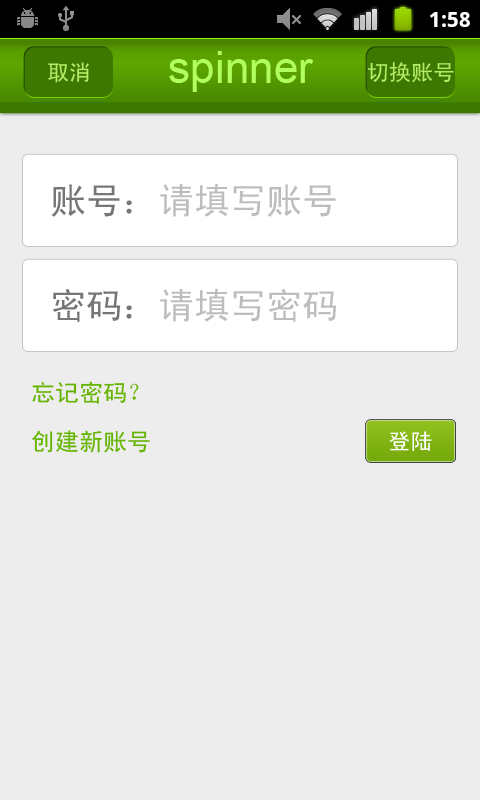
<style>
.page{position:relative;width:480px;height:800px;background:#eeeded}
.page>*{position:absolute;margin:0}
.t1{font:44px "ArialMT";color:#b0ff5f}
.t2{font:22px "SimHei";color:#b4ec66}
.t3{font:36px "SimHei";color:#bebdbd}
.t4{font:36px "SimHei";color:#767676}
.t5{font:24px "SimHei";color:#64b400}
.t6{font:22px "SimHei";color:#ffffff}
</style>
<div class="page">
<p class="t1" style="left:169px;top:51px;width:145px;height:41px">spinner</p>
<p class="t2" style="left:48px;top:62px;width:41px;height:21px">取消</p>
<p class="t2" style="left:368px;top:62px;width:86px;height:21px">切换账号</p>
<p class="t3" style="left:51px;top:183px;width:285px;height:34px"><span class="t4">账号：</span>请填写账号</p>
<p class="t3" style="left:52px;top:288px;width:285px;height:34px"><span class="t4">密码：</span>请填写密码</p>
<p class="t5" style="left:32px;top:381px;width:107px;height:23px">忘记密码？</p>
<p class="t5" style="left:32px;top:430px;width:118px;height:23px">创建新账号</p>
<p class="t6" style="left:389px;top:431px;width:43px;height:21px">登陆</p>
</div>
